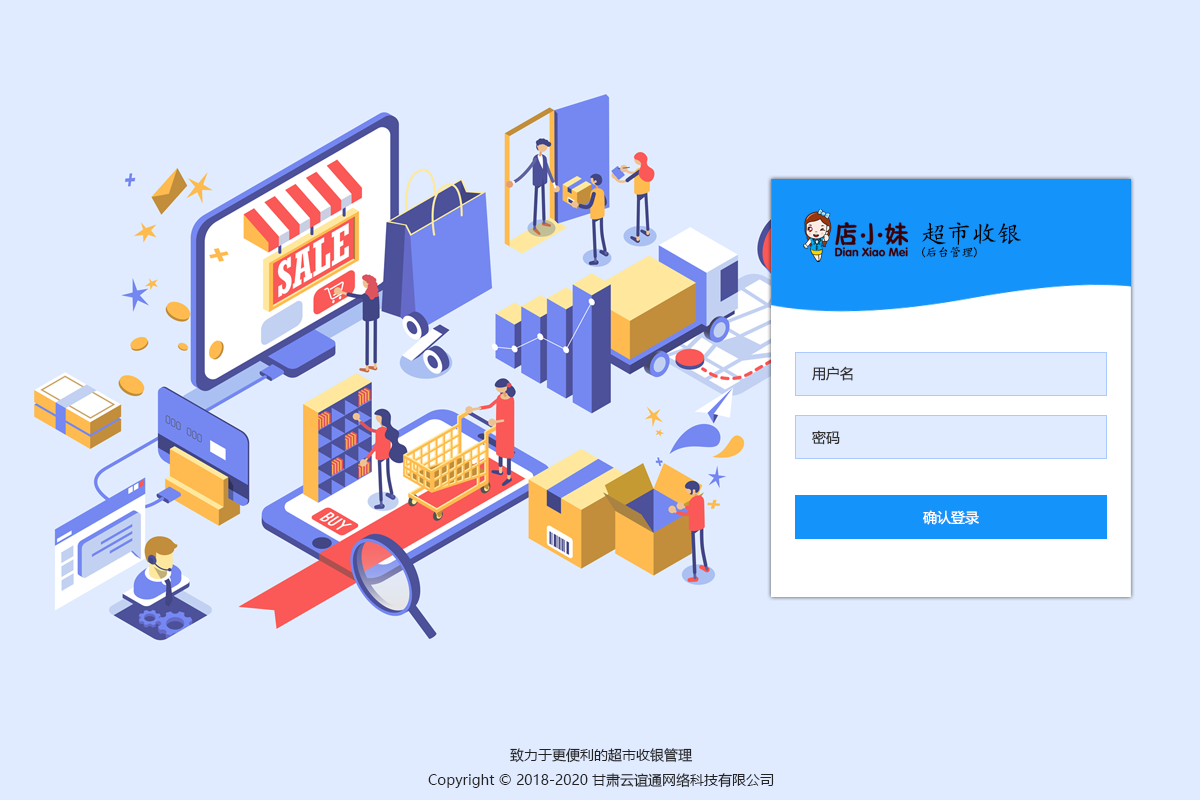
<style>
.page{position:relative;width:1200px;height:800px;background:#e0ebff}
.page>*{position:absolute;margin:0}
.t1{font:25px "KaiTi";color:#000000}
.t2{font:12px "KaiTi";color:#000000}
.t3{font:14px "MicrosoftYaHei";color:#333333}
.t4{font:14px "MicrosoftYaHei";color:#ffffff}
.t5{font:14px "MicrosoftYaHei";color:#222222}
</style>
<div class="page">
<p class="t1" style="left:922px;top:222px;width:99px;height:24px">超市收银</p>
<p class="t2" style="left:922px;top:246px;width:55px;height:12px">(后台管理)</p>
<p class="t3" style="left:812px;top:366px;width:41px;height:15px">用户名</p>
<p class="t3" style="left:812px;top:430px;width:28px;height:15px">密码</p>
<p class="t4" style="left:923px;top:510px;width:56px;height:15px">确认登录</p>
<p class="t5" style="left:510px;top:748px;width:183px;height:15px">致力于更便利的超市收银管理</p>
<p class="t5" style="left:428px;top:773px;width:346px;height:15px">Copyright © 2018-2020 甘肃云谊通网络科技有限公司</p>
</div>
